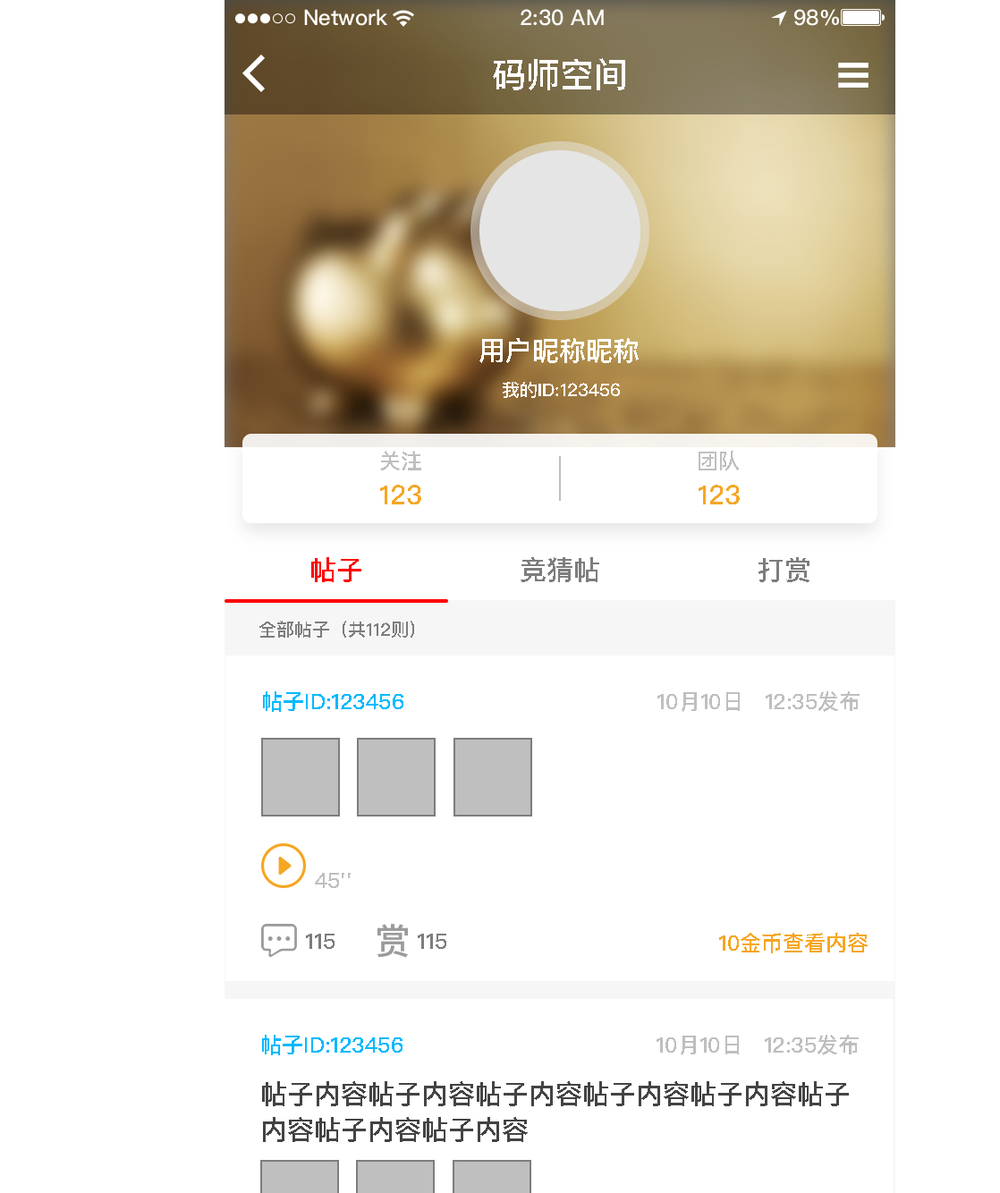
<style>
.page{position:relative;width:1000px;height:1193px;background:#ffffff}
.page>*{position:absolute;margin:0}
.t1{font:34px "PingFangSC-Medium";color:#ffffff;text-transform:uppercase}
.t2{font:26.8px "PingFangSC-Medium";color:#ffffff;text-transform:uppercase}
.t3{font:17.9px "PingFangSC-Medium";color:#ffffff;text-transform:uppercase}
.t4{font:21.5px "PingFangSC-Medium";color:#bfbfbf;text-transform:uppercase}
.t5{font:26.8px "PingFangSC-Medium";color:#f6a623;text-transform:uppercase}
.t6{font:26.8px "PingFangSC-Medium";color:#ff0000;text-transform:uppercase}
.t7{font:26.8px "PingFangSC-Medium";color:#7d7d7d;text-transform:uppercase}
.t8{font:17.9px "PingFangSC-Medium";color:#7d7d7d;text-transform:uppercase}
.t9{font:21.5px "PingFangSC-Medium";color:#01b9fd;text-transform:uppercase}
.t10{font:21.5px "PingFangSC-Medium";color:#01b9fd}
.t11{font:21.5px "PingFangSC-Medium";color:#7d7d7d;text-transform:uppercase}
.t12{font:21.5px "PingFangSC-Medium";color:#f6a623;text-transform:uppercase}
.t13{font:26.8px/35.8px "PingFangSC-Medium";color:#434343;text-transform:uppercase}
</style>
<div class="page">
<p class="t1" style="left:493px;top:58px;width:132px;height:32px">码师空间</p>
<p class="t2" style="left:479px;top:338px;width:159px;height:25px">用户昵称昵称</p>
<p class="t3" style="left:503px;top:382px;width:117px;height:16px">我的id:123456</p>
<p class="t4" style="left:380px;top:451px;width:41px;height:19px">关注</p>
<p class="t4" style="left:698px;top:451px;width:41px;height:19px">团队</p>
<p class="t5" style="left:380px;top:485px;width:41px;height:19px">123</p>
<p class="t5" style="left:698px;top:485px;width:41px;height:19px">123</p>
<p class="t6" style="left:311px;top:557px;width:50px;height:25px">帖子</p>
<p class="t7" style="left:520px;top:557px;width:79px;height:25px">竞猜帖</p>
<p class="t7" style="left:758px;top:557px;width:51px;height:25px">打赏</p>
<p class="t8" style="left:259px;top:621px;width:155px;height:17px">全部帖子（共112则）</p>
<p class="t9" style="left:263px;top:691px;width:140px;height:21px">帖子<span class="t10">Ｉ</span>D:123456</p>
<p class="t4" style="left:657px;top:691px;width:202px;height:21px">10月10日   12:35发布</p>
<p class="t4" style="left:315px;top:873px;width:36px;height:15px">45''</p>
<p class="t11" style="left:306px;top:934px;width:28px;height:15px">115</p>
<p class="t11" style="left:418px;top:934px;width:28px;height:15px">115</p>
<p class="t12" style="left:719px;top:933px;width:148px;height:20px">10金币查看内容</p>
<p class="t9" style="left:262px;top:1035px;width:140px;height:20px">帖子<span class="t10">Ｉ</span>D:123456</p>
<p class="t4" style="left:656px;top:1035px;width:202px;height:20px">10月10日   12:35发布</p>
<p class="t13" style="left:262px;top:1081px;width:587px;height:61px">帖子内容帖子内容帖子内容帖子内容帖子内容帖子<br>内容帖子内容帖子内容</p>
</div>
